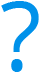
<style>
.page{position:relative;width:40px;height:73px;background:#ffffff}
.page>*{position:absolute;margin:0}
.t1{font:96px "OpenSans";color:#0091ea}
</style>
<div class="page">
<p class="t1" style="left:1px;top:1px;width:38px;height:71px">?</p>
</div>
